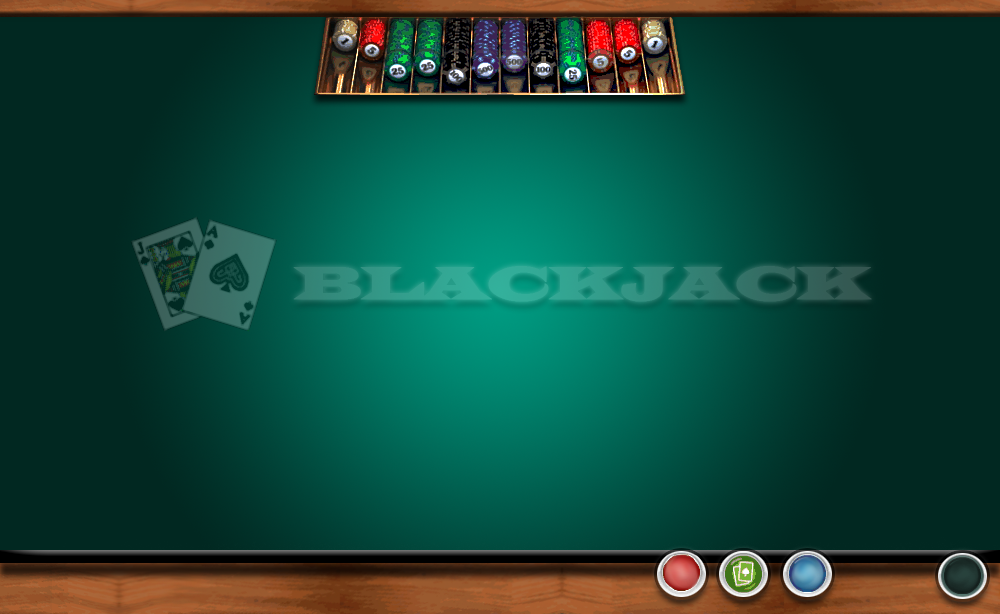
<style>
.page{position:relative;width:1000px;height:614px;background:#012821}
.page>*{position:absolute;margin:0}
.t1{font:48px "LatinWide";letter-spacing:-0.04em;text-transform:uppercase;font-weight:bold}
</style>
<div class="page">
<p class="t1" style="left:293px;top:266px;width:579px;height:36px">BlackJack</p>
</div>
